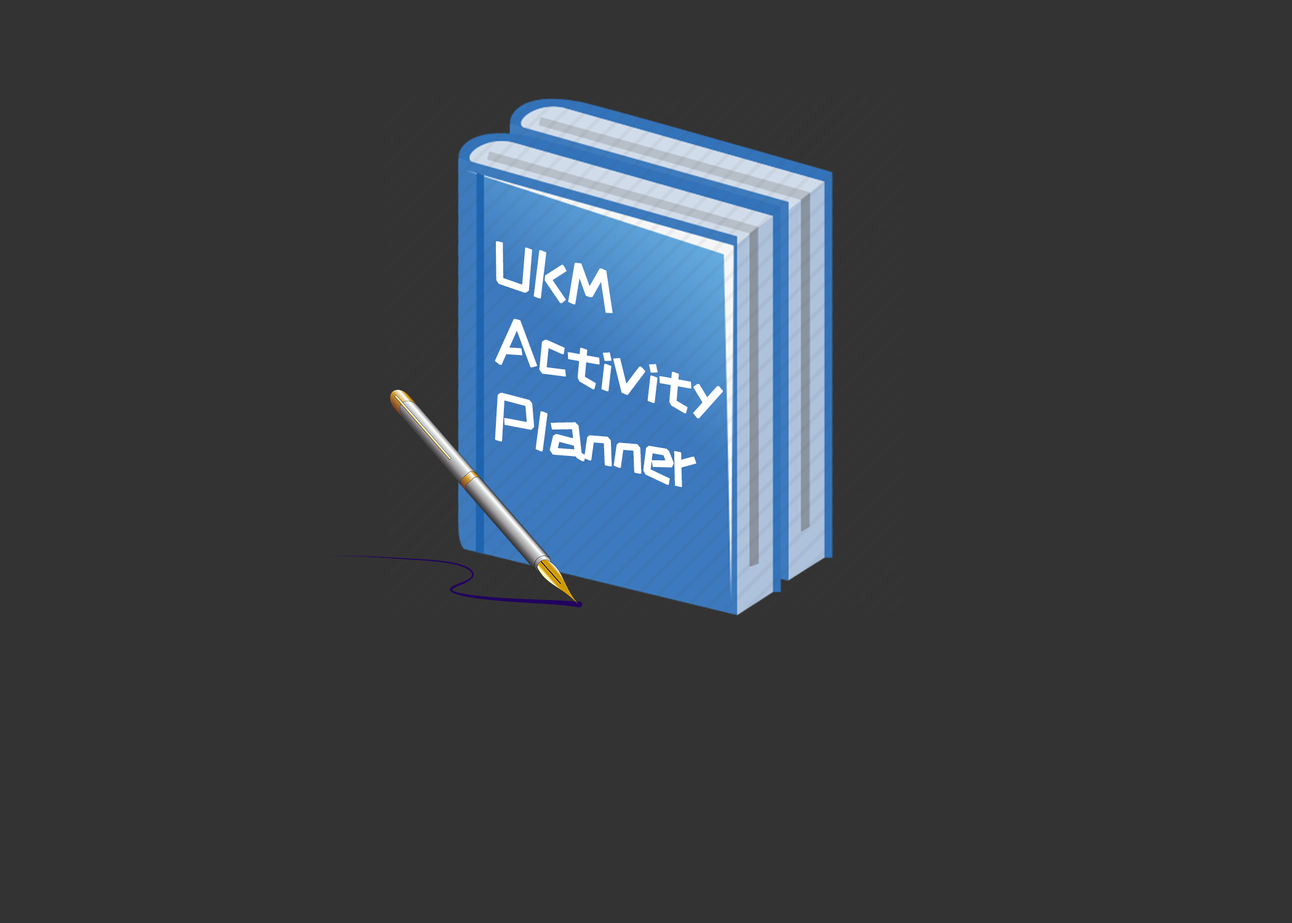
<style>
.page{position:relative;width:1292px;height:923px;background:#333333}
.page>*{position:absolute;margin:0}
.t1{font:63.6px "HappyZcool-2016";color:#ffffff;font-weight:bold;scale:0.91 1}
</style>
<div class="page">
<p class="t1" style="left:495px;top:241px;width:228px;height:246px;rotate:15deg">UKM<br>Activity<br>Planner</p>
</div>
